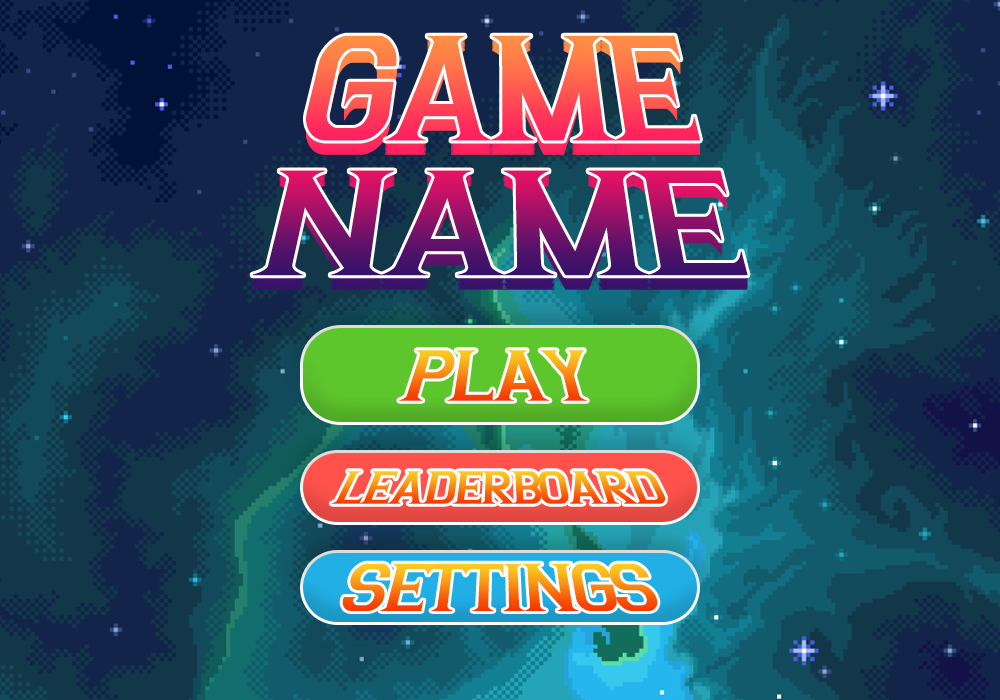
<style>
.page{position:relative;width:1000px;height:700px}
.page>*{position:absolute;margin:0}
.t1{font:147px/134.9px "Argentina";letter-spacing:-0.04em}
.t2{font:70.6px "Argentina";letter-spacing:-0.04em}
.t3{font:45.1px "Argentina";letter-spacing:-0.04em}
.t4{font:66.2px "Argentina";letter-spacing:-0.04em}
</style>
<div class="page">
<p class="t1" style="left:252px;top:37px;width:496px;height:240px;text-align:center">GAME<br>NAME</p>
<p class="t1" style="left:252px;top:38px;width:496px;height:240px;text-align:center">GAME<br>NAME</p>
<p class="t1" style="left:252px;top:39px;width:496px;height:240px;text-align:center">GAME<br>NAME</p>
<p class="t1" style="left:252px;top:40px;width:496px;height:240px;text-align:center">GAME<br>NAME</p>
<p class="t1" style="left:252px;top:41px;width:496px;height:241px;text-align:center">GAME<br>NAME</p>
<p class="t1" style="left:252px;top:35px;width:496px;height:241px;text-align:center">GAME<br>NAME</p>
<p class="t1" style="left:252px;top:43px;width:496px;height:240px;text-align:center">GAME<br>NAME</p>
<p class="t1" style="left:252px;top:44px;width:496px;height:240px;text-align:center">GAME<br>NAME</p>
<p class="t1" style="left:252px;top:45px;width:496px;height:240px;text-align:center">GAME<br>NAME</p>
<p class="t1" style="left:252px;top:46px;width:496px;height:240px;text-align:center">GAME<br>NAME</p>
<p class="t1" style="left:252px;top:47px;width:496px;height:241px;text-align:center">GAME<br>NAME</p>
<p class="t1" style="left:252px;top:49px;width:496px;height:240px;text-align:center">GAME<br>NAME</p>
<p class="t1" style="left:252px;top:50px;width:496px;height:240px;text-align:center">GAME<br>NAME</p>
<p class="t2" style="left:399px;top:350px;width:188px;height:51px">PLAY</p>
<p class="t3" style="left:331px;top:471px;width:334px;height:33px">LEADERBOARD</p>
<p class="t4" style="left:342px;top:563px;width:316px;height:48px">SETTINGS</p>
</div>
